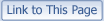
<style>
.page{position:relative;width:104px;height:21px}
.page>*{position:absolute;margin:0}
.t1{font:12px "Tahoma";color:#3d5f95}
</style>
<div class="page">
<p class="t1" style="left:7px;top:5px;width:90px;height:12px">Link to This Page</p>
</div>
